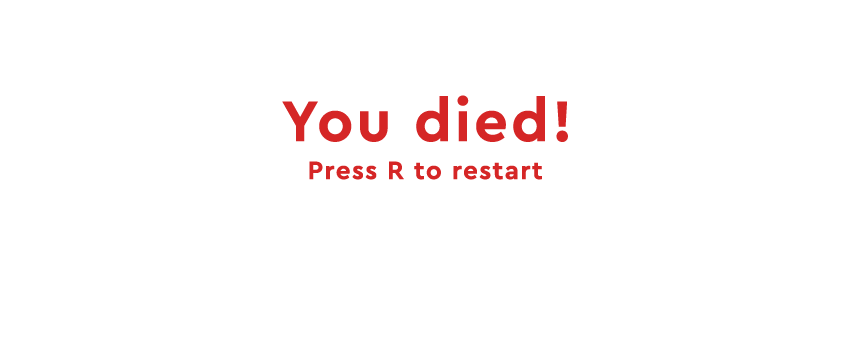
<style>
.page{position:relative;width:850px;height:362px;background:#ffffff}
.page>*{position:absolute;margin:0}
.t1{font:60px "CeraPro-Bold";letter-spacing:0.05em;color:#d52626}
.t2{font:26.2px "CeraPro-Bold";letter-spacing:0.05em;color:#d52626}
</style>
<div class="page">
<p class="t1" style="left:282px;top:95px;width:286px;height:47px">You died!</p>
<p class="t2" style="left:309px;top:161px;width:233px;height:19px">Press R to restart</p>
</div>
